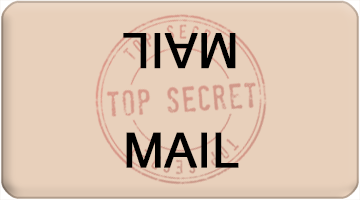
<style>
.page{position:relative;width:360px;height:200px;background:#e8d0bb}
.page>*{position:absolute;margin:0}
.t1{font:48px "ArialMT";color:#000000;font-weight:bold}
</style>
<div class="page">
<p class="t1" style="left:123px;top:33px;width:113px;height:36px;rotate:180deg">MAIL</p>
<p class="t1" style="left:126px;top:132px;width:113px;height:36px">MAIL</p>
</div>
